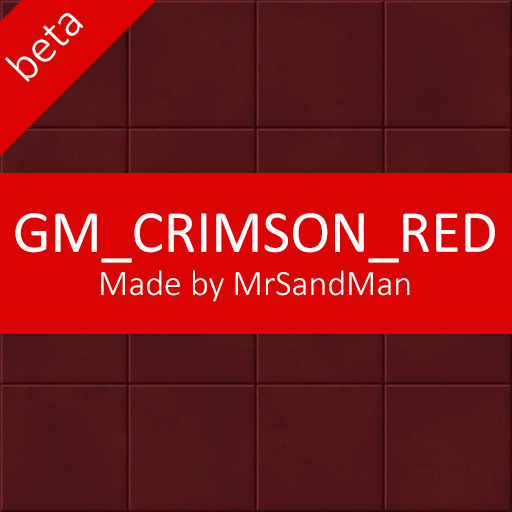
<style>
.page{position:relative;width:512px;height:512px;background:#dc0303}
.page>*{position:absolute;margin:0}
.t1{font:48px "Calibri-Light";color:#ffffff}
.t2{font:36px "Calibri-Light";color:#ffffff}
.t3{font:60px "Calibri";color:#ffffff}
</style>
<div class="page">
<p class="t1" style="left:5px;top:13px;width:78px;height:69px;rotate:-45deg">beta</p>
<p class="t2" style="left:15px;top:213px;width:480px;height:89px;text-align:center"><span class="t3">GM_CRIMSON_RED<br></span>Made by MrSandMan</p>
</div>
